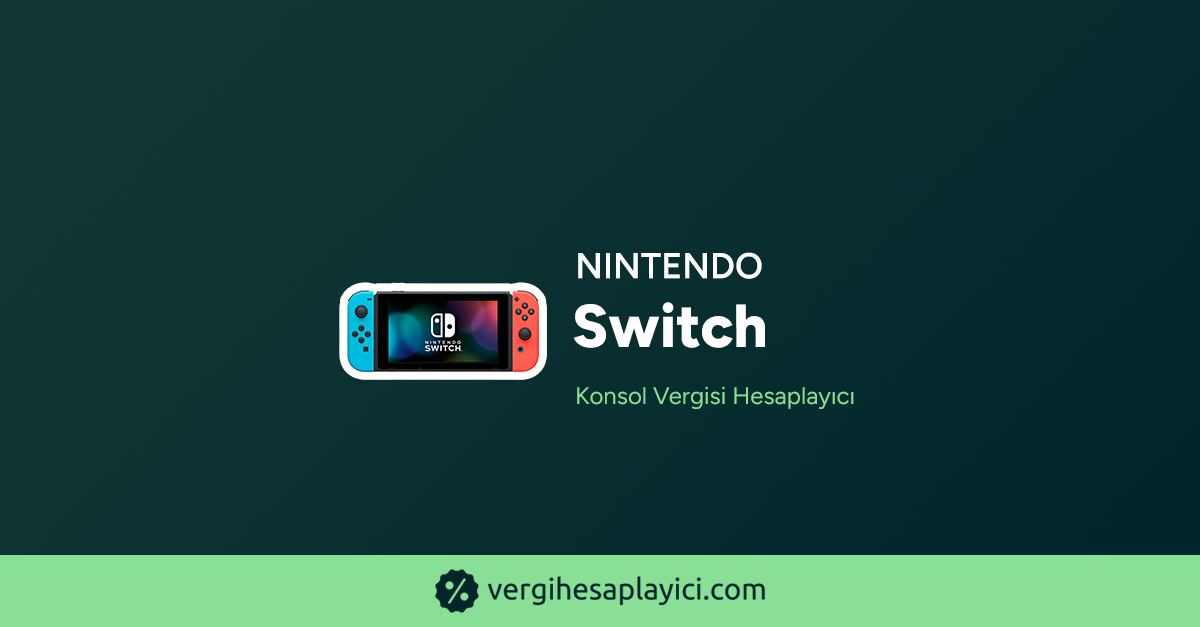
<style>
.page{position:relative;width:1200px;height:627px}
.page>*{position:absolute;margin:0}
.t1{font:36px "Figtree-SemiBold";color:#ffffff;text-transform:uppercase;font-weight:bold}
.t2{font:60.3px "Figtree-ExtraBold";color:#ffffff;font-weight:bold}
.t3{font:24px "Figtree-Regular";color:#88df95;font-weight:bold}
</style>
<div class="page">
<p class="t1" style="left:578px;top:252px;width:184px;height:27px">Nintendo</p>
<p class="t2" style="left:574px;top:302px;width:191px;height:46px">Switch</p>
<p class="t3" style="left:577px;top:386px;width:277px;height:23px">Konsol Vergisi Hesaplayıcı</p>
</div>
